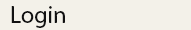
<style>
.page{position:relative;width:191px;height:30px;background:#f3f1e9}
.page>*{position:absolute;margin:0}
.t1{font:24px "MyriadPro-Regular";color:#111111}
</style>
<div class="page">
<p class="t1" style="left:11px;top:6px;width:54px;height:22px">Login</p>
</div>
